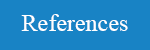
<style>
.page{position:relative;width:150px;height:50px;background:#1883c5}
.page>*{position:absolute;margin:0}
.t1{font:24px "TimesNewRomanPSMT";color:#ffffff}
</style>
<div class="page">
<p class="t1" style="left:21px;top:14px;width:107px;height:17px">References</p>
</div>
